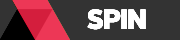
<style>
.page{position:relative;width:180px;height:40px;background:#333333}
.page>*{position:absolute;margin:0}
.t1{font:27.9px "AlrightSans-Black";letter-spacing:-0.05em;color:#ffffff;text-transform:uppercase}
.t2{font:27.9px "AlrightSans-Black";letter-spacing:0.2em;color:#ffffff;text-transform:uppercase}
</style>
<div class="page">
<p class="t1" style="left:87px;top:9px;width:59px;height:21px">spi<span class="t2">n</span></p>
<p class="t1" style="left:87px;top:9px;width:59px;height:21px">spi<span class="t2">n</span></p>
<p class="t1" style="left:87px;top:9px;width:59px;height:21px">spi<span class="t2">n</span></p>
<p class="t1" style="left:87px;top:9px;width:59px;height:21px">spi<span class="t2">n</span></p>
<p class="t1" style="left:87px;top:9px;width:59px;height:21px">spi<span class="t2">n</span></p>
</div>
